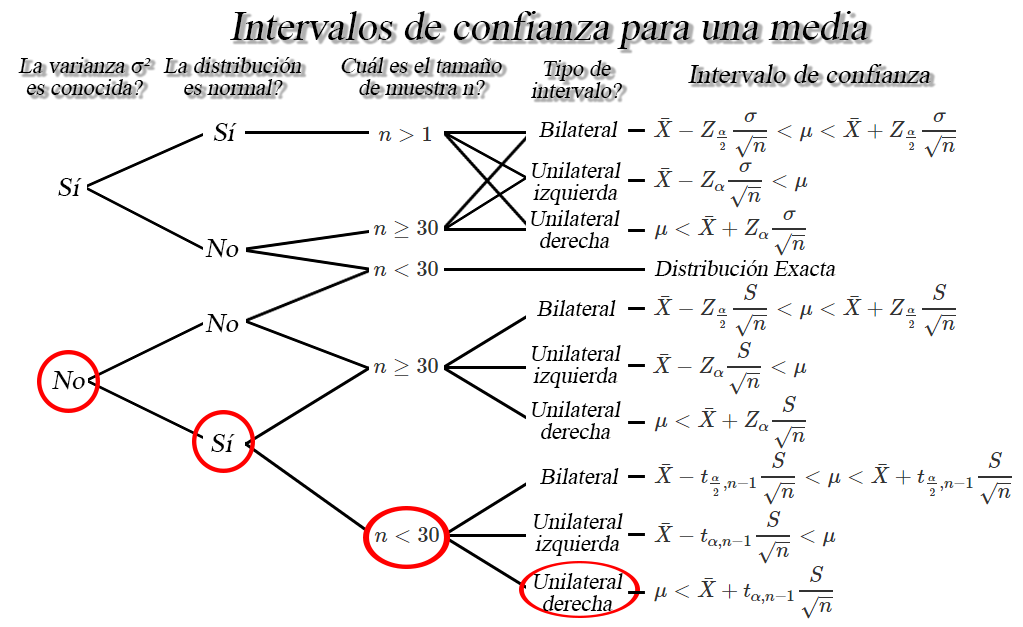
<style>
.page{position:relative;width:1023px;height:627px;background:#ffffff}
.page>*{position:absolute;margin:0}
.t1{font:30.5px "TimesNewRomanPSMT";color:#000000;font-style:italic}
.t2{font:17px/21.7px "TimesNewRomanPSMT";color:#000000;font-style:italic}
.t3{font:20.4px "TimesNewRomanPSMT";color:#000000;font-style:italic}
.t4{font:26.7px "TimesNewRomanPSMT";color:#000000;font-style:italic}
.t5{font:17px "TimesNewRomanPSMT";color:#000000;font-style:italic}
</style>
<div class="page">
<p class="t1" style="left:230px;top:11px;width:638px;height:38px">Intervalos de confianza para una media</p>
<p class="t2" style="left:18px;top:57px;width:133px;height:38px;text-align:center">La varianza σ²<br>es conocida?</p>
<p class="t2" style="left:163px;top:57px;width:138px;height:38px;text-align:center">La distribución<br>es normal?</p>
<p class="t2" style="left:341px;top:57px;width:161px;height:38px;text-align:center">Cuál es el tamaño<br>de muestra n?</p>
<p class="t2" style="left:531px;top:60px;width:91px;height:38px;text-align:center">Tipo de<br>intervalo?</p>
<p class="t3" style="left:688px;top:64px;width:243px;height:19px">Intervalo de confianza</p>
<p class="t4" style="left:213px;top:123px;width:24px;height:18px">Sí</p>
<p class="t5" style="left:539px;top:121px;width:79px;height:16px">Bilateral</p>
<p class="t2" style="left:532px;top:162px;width:89px;height:43px;text-align:center">Unilateral<br>izquierda</p>
<p class="t4" style="left:58px;top:178px;width:24px;height:18px">Sí</p>
<p class="t2" style="left:531px;top:210px;width:89px;height:38px;text-align:center">Unilateral<br>derecha</p>
<p class="t4" style="left:205px;top:239px;width:34px;height:19px">No</p>
<p class="t5" style="left:654px;top:260px;width:182px;height:16px">Distribución Exacta</p>
<p class="t5" style="left:537px;top:300px;width:79px;height:16px">Bilateral</p>
<p class="t4" style="left:205px;top:314px;width:34px;height:19px">No</p>
<p class="t2" style="left:532px;top:345px;width:89px;height:43px;text-align:center">Unilateral<br>izquierda</p>
<p class="t4" style="left:52px;top:371px;width:33px;height:19px">No</p>
<p class="t2" style="left:532px;top:401px;width:89px;height:38px;text-align:center">Unilateral<br>derecha</p>
<p class="t4" style="left:211px;top:434px;width:24px;height:18px">Sí</p>
<p class="t5" style="left:540px;top:468px;width:79px;height:16px">Bilateral</p>
<p class="t2" style="left:534px;top:513px;width:89px;height:43px;text-align:center">Unilateral<br>izquierda</p>
<p class="t2" style="left:534px;top:573px;width:89px;height:38px;text-align:center">Unilateral<br>derecha</p>
</div>
